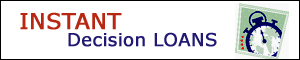
<style>
.page{position:relative;width:300px;height:60px;background:#ffffff}
.page>*{position:absolute;margin:0}
.t1{font:18px/17px "Verdana";color:#201873;font-weight:bold}
.t2{font:22px/17px "Verdana";color:#b82711;font-weight:bold}
</style>
<div class="page">
<p class="t1" style="left:19px;top:12px;width:199px;height:42px"><span class="t2">INSTANT<br>       </span>Decision LOANS</p>
</div>
